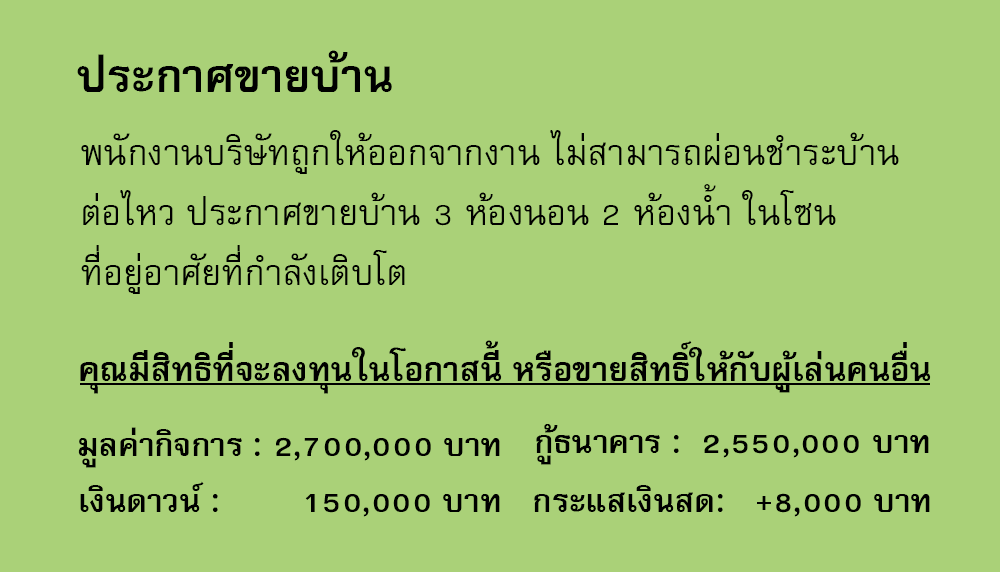
<style>
.page{position:relative;width:1000px;height:572px;background:#aad178}
.page>*{position:absolute;margin:0}
.t1{font:64px "FreesiaUPCBold";color:#000000}
.t2{font:50px/60px "FreesiaUPC";color:#000000}
.t3{font:47px "FreesiaUPCBold";color:#000000}
.t4{font:45px "FreesiaUPCBold";color:#000000}
</style>
<div class="page">
<p class="t1" style="left:77px;top:50px;width:315px;height:42px">ประกาศขายบ้าน</p>
<p class="t2" style="left:81px;top:130px;width:818px;height:164px">พนักงานบริษัทถูกให้ออกจากงาน ไม่สามารถผ่อนชำระบ้าน<br>ต่อไหว ประกาศขายบ้าน 3 ห้องนอน 2 ห้องน้ำ ในโซน<br>ที่อยู่อาศัยที่กำลังเติบโต</p>
<p class="t3" style="left:80px;top:340px;width:851px;height:54px">คุณมีสิทธิที่จะลงทุนในโอกาสนี้ หรือขายสิทธิ์ให้กับผู้เล่นคนอื่น</p>
<p class="t4" style="left:536px;top:424px;width:393px;height:41px">กู้ธนาคาร :  2,550,000 บาท</p>
<p class="t4" style="left:78px;top:427px;width:422px;height:41px">มูลค่ากิจการ : 2,700,000 บาท</p>
<p class="t4" style="left:80px;top:481px;width:420px;height:36px">เงินดาวน์ :        150,000 บาท</p>
<p class="t4" style="left:534px;top:485px;width:396px;height:32px">กระแสเงินสด:   +8,000 บาท</p>
</div>
